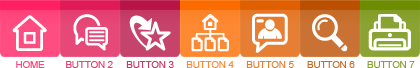
<style>
.page{position:relative;width:420px;height:68px;background:#ffffff}
.page>*{position:absolute;margin:0}
.t1{font:9.6px "ArialMT";color:#ff467d}
.t2{font:9.6px "ArialMT";color:#e54072}
.t3{font:9.6px "ArialMT";color:#c43b66}
.t4{font:9.6px "ArialMT";color:#fd8933}
.t5{font:9.6px "ArialMT";color:#e67e31}
.t6{font:9.6px "ArialMT";color:#c86f2f}
.t7{font:9.6px "ArialMT";color:#89a231}
</style>
<div class="page">
<p class="t1" style="left:16px;top:61px;width:29px;height:7px">HOME</p>
<p class="t2" style="left:66px;top:61px;width:47px;height:7px">BUTTON 2</p>
<p class="t3" style="left:126px;top:61px;width:48px;height:7px">BUTTON 3</p>
<p class="t4" style="left:186px;top:61px;width:48px;height:7px">BUTTON 4</p>
<p class="t5" style="left:246px;top:61px;width:48px;height:7px">BUTTON 5</p>
<p class="t6" style="left:307px;top:61px;width:48px;height:7px">BUTTON 6</p>
<p class="t7" style="left:367px;top:61px;width:48px;height:7px">BUTTON 7</p>
</div>
